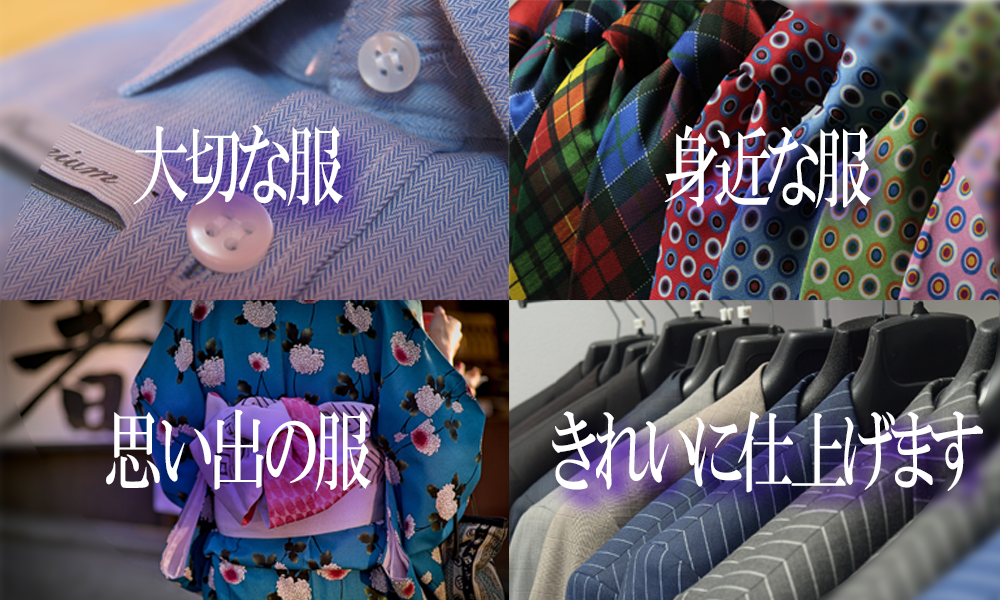
<style>
.page{position:relative;width:1000px;height:600px}
.page>*{position:absolute;margin:0}
.t1{font:87.5px "HGPMinchoB";letter-spacing:-0.1em;color:#ffffff;scale:0.67 1}
.t2{font:87.5px "HGSMinchoB";letter-spacing:-0.1em;color:#ffffff;scale:0.67 1}
</style>
<div class="page">
<p class="t1" style="left:133px;top:125px;width:211px;height:82px">大切な服</p>
<p class="t1" style="left:664px;top:125px;width:208px;height:84px">身近な服</p>
<p class="t2" style="left:106px;top:409px;width:266px;height:83px">思い出の服</p>
<p class="t1" style="left:552px;top:411px;width:431px;height:82px">きれいに仕上げます</p>
</div>
